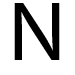
<style>
.page{position:relative;width:75px;height:75px;background:#ffffff}
.page>*{position:absolute;margin:0}
.t1{font:84.2px "MyriadPro-Regular";color:#000000;scale:1.05 1}
</style>
<div class="page">
<p class="t1" style="left:14px;top:3px;width:46px;height:57px">N</p>
</div>
